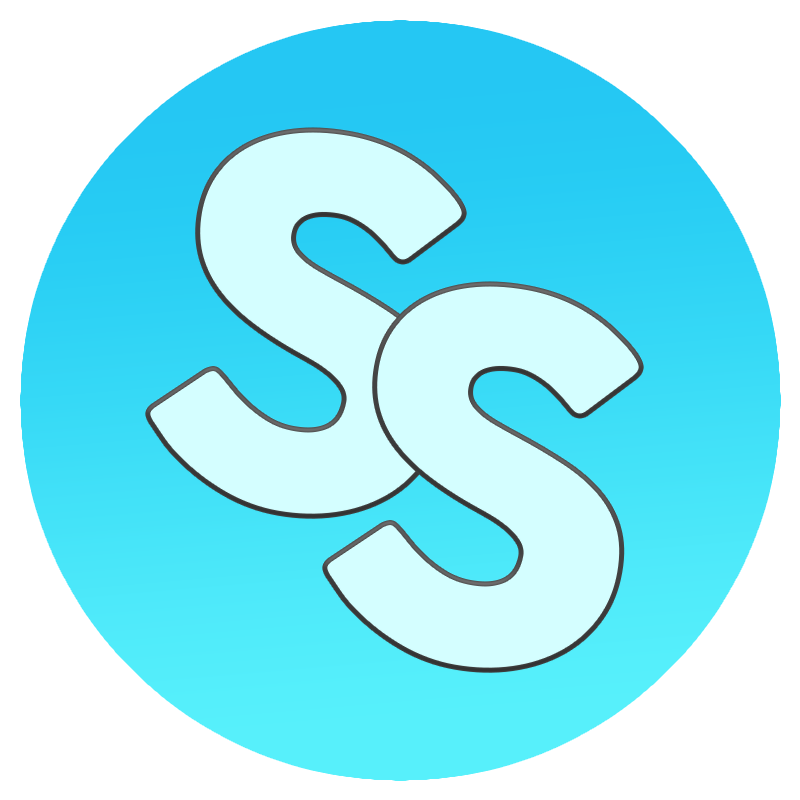
<style>
.page{position:relative;width:800px;height:800px;background:#ffffff}
.page>*{position:absolute;margin:0}
.t1{font:502.7px "Cocogoose";color:#d4feff}
</style>
<div class="page">
<p class="t1" style="left:147px;top:130px;width:318px;height:387px;rotate:10deg">S</p>
<p class="t1" style="left:324px;top:284px;width:318px;height:387px;rotate:10deg">S</p>
</div>
